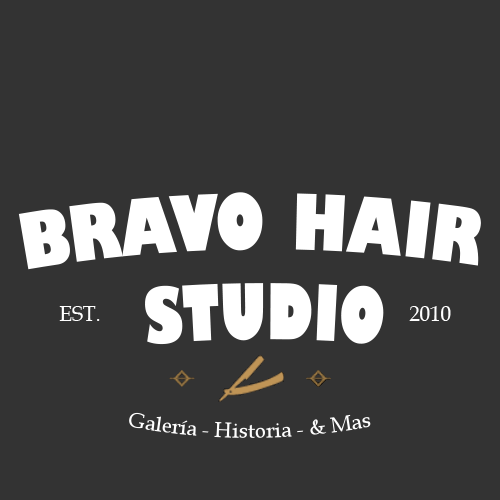
<style>
.page{position:relative;width:500px;height:500px;background:#333333}
.page>*{position:absolute;margin:0}
.t1{font:75px "GillSans-UltraBoldCondensed";color:#ffffff}
.t2{font:20.8px "BookAntiqua";color:#ffffff}
</style>
<div class="page">
<p class="t1" style="left:18px;top:192px;width:463px;height:153px;text-align:center">BRAVO HAIR <br>STUDIO</p>
<p class="t2" style="left:59px;top:306px;width:41px;height:15px">EST.</p>
<p class="t2" style="left:409px;top:306px;width:42px;height:15px">2010</p>
<p class="t2" style="left:129px;top:412px;width:242px;height:26px">Galería - Historia - &amp; Mas</p>
</div>
